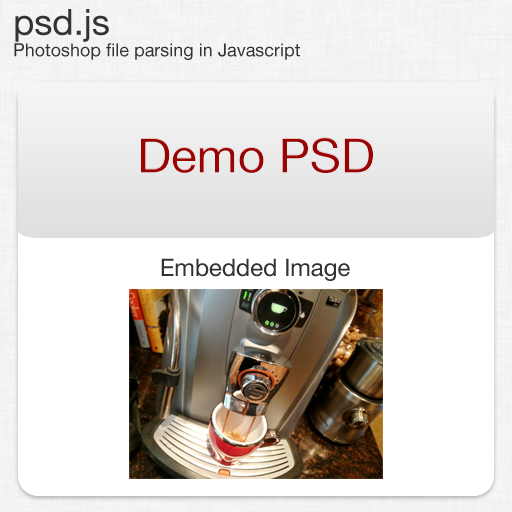
<style>
.page{position:relative;width:512px;height:512px;background:#ffffff}
.page>*{position:absolute;margin:0}
.t1{font:18px "HelveticaNeue";color:#333333}
.t2{font:36px "HelveticaNeue";color:#333333}
.t3{font:48px "HelveticaNeue";color:#980303}
.t4{font:24px "HelveticaNeue";color:#333333}
</style>
<div class="page">
<p class="t1" style="left:14px;top:9px;width:286px;height:51px"><span class="t2">psd.js<br></span>Photoshop file parsing in Javascript</p>
<p class="t3" style="left:141px;top:137px;width:232px;height:36px">Demo PSD</p>
<p class="t4" style="left:161px;top:258px;width:189px;height:23px">Embedded Image</p>
</div>
